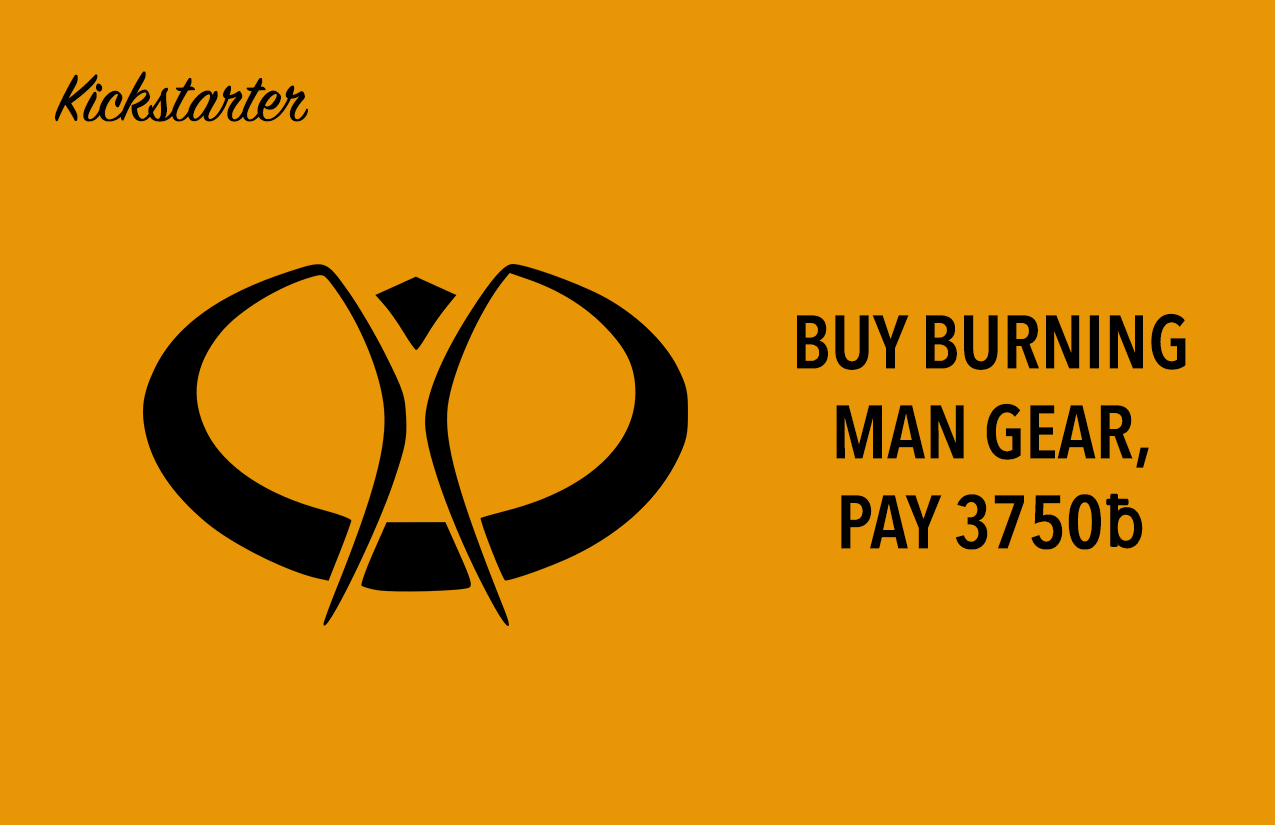
<style>
.page{position:relative;width:1275px;height:825px;background:#e99606}
.page>*{position:absolute;margin:0}
.t1{font:75px "SignPainter-HouseScript";color:#000000}
.t2{font:75px "AvenirNextCondensed-DemiBold";color:#000000;text-transform:uppercase}
.t3{font:75px "Helvetica";color:#e99606;text-transform:uppercase}
.t4{font:70.8px "Helvetica";color:#000000;scale:0.9 1}
</style>
<div class="page">
<p class="t1" style="left:55px;top:71px;width:253px;height:51px">Kickstarter</p>
<p class="t2" style="left:797px;top:313px;width:389px;height:237px;text-align:center">Buy Burning Man gear, pay 3750<span class="t3">ƀ</span></p>
<p class="t4" style="left:1107px;top:494px;width:35px;height:54px">ƀ</p>
</div>
